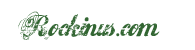
<style>
.page{position:relative;width:195px;height:50px;background:#ffffff}
.page>*{position:absolute;margin:0}
.t1{font:36px "Hawaii-Killer";color:#336633}
</style>
<div class="page">
<p class="t1" style="left:18px;top:11px;width:142px;height:29px">Rockinus.com</p>
</div>
